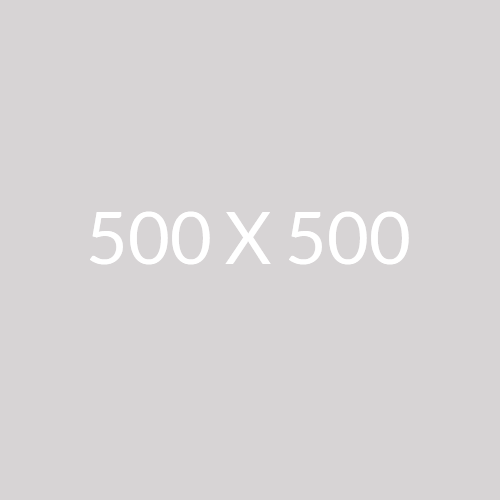
<style>
.page{position:relative;width:500px;height:500px;background:#d7d4d5}
.page>*{position:absolute;margin:0}
.t1{font:72px "Lato-Regular";color:#ffffff}
</style>
<div class="page">
<p class="t1" style="left:90px;top:211px;width:319px;height:54px">500 X 500</p>
</div>
